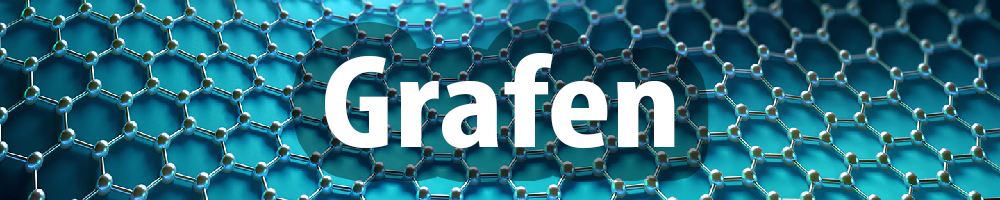
<style>
.page{position:relative;width:1000px;height:200px}
.page>*{position:absolute;margin:0}
.t1{font:133.9px "MyriadPro-BoldCond";color:#ffffff;scale:1.15 1}
</style>
<div class="page">
<p class="t1" style="left:325px;top:53px;width:350px;height:96px">Grafen</p>
</div>
